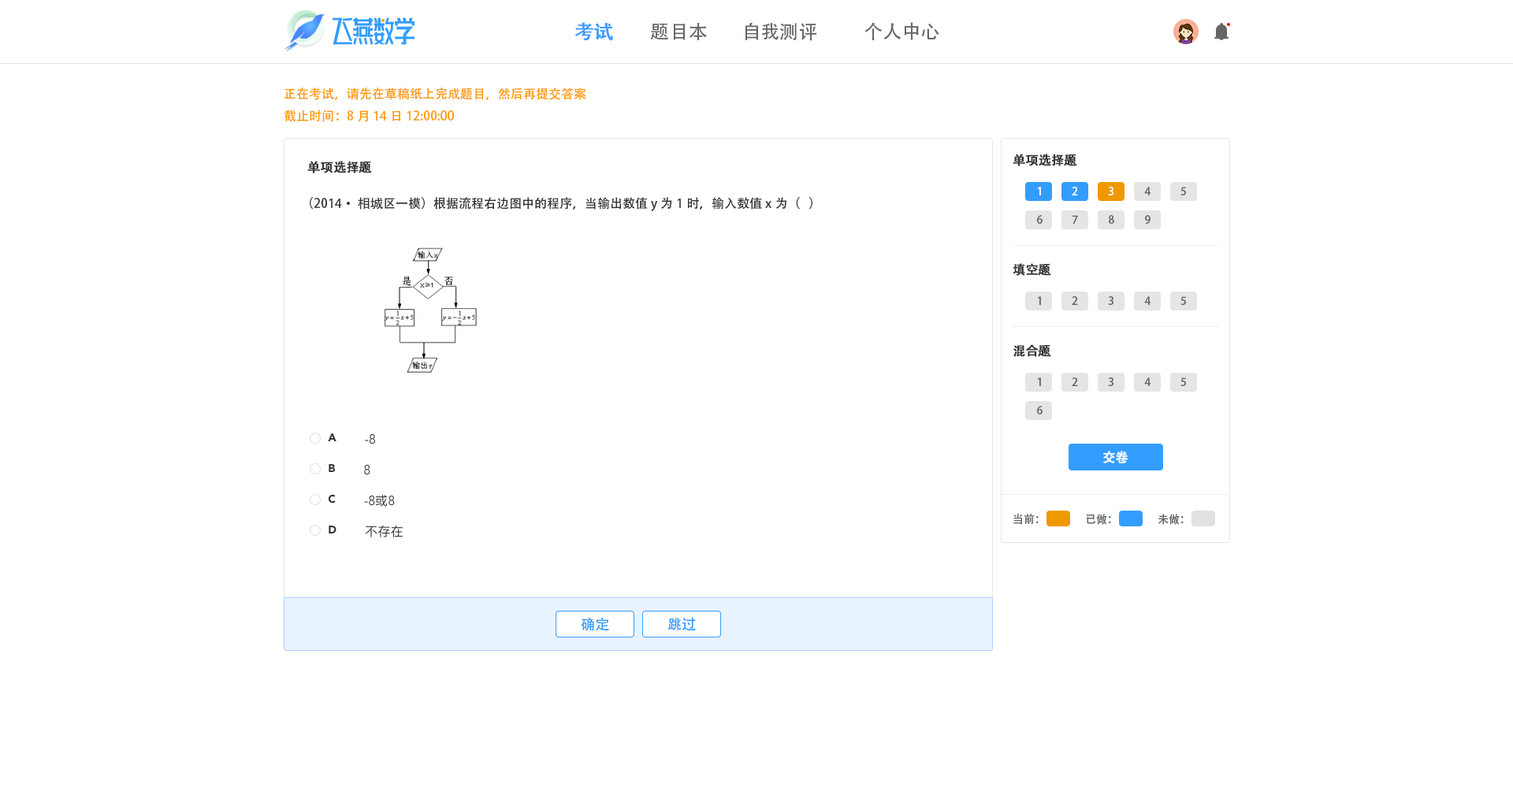
<style>
.page{position:relative;width:1513px;height:788px;background:#ffffff}
.page>*{position:absolute;margin:0}
.t1{font:18.9px "AdobeHeitiStd-Regular";color:#409eff;font-weight:bold}
.t2{font:18.9px "AdobeHeitiStd-Regular";color:#666666}
.t3{font:12.6px "AdobeHeitiStd-Regular";color:#ff9902}
.t4{font:12.6px "AdobeHeitiStd-Regular";color:#333333;font-weight:bold}
.t5{font:12.6px "AdobeHeitiStd-Regular";color:#333333}
.t6{font:11px "AdobeHeitiStd-Regular";color:#ffffff}
.t7{font:11px "AdobeHeitiStd-Regular";color:#666666}
.t8{font:12.6px "AdobeHeitiStd-Regular";color:#ffffff;font-weight:bold}
.t9{font:14.2px "AdobeHeitiStd-Regular";color:#339dff}
</style>
<div class="page">
<p class="t1" style="left:575px;top:22px;width:38px;height:19px">考试</p>
<p class="t2" style="left:650px;top:23px;width:57px;height:17px">题目本</p>
<p class="t2" style="left:745px;top:22px;width:71px;height:19px">自我测评</p>
<p class="t2" style="left:865px;top:22px;width:74px;height:18px">个人中心</p>
<p class="t3" style="left:284px;top:87px;width:302px;height:13px">正在考试，请先在草稿纸上完成题目，然后再提交答案</p>
<p class="t3" style="left:284px;top:110px;width:171px;height:12px">截止时间：8月14日12:00:00</p>
<p class="t4" style="left:307px;top:161px;width:65px;height:12px">单项选择题</p>
<p class="t4" style="left:1013px;top:154px;width:64px;height:12px">单项选择题</p>
<p class="t5" style="left:310px;top:197px;width:503px;height:14px">（2014·相城区一模）根据流程右边图中的程序，当输出数值y为1时，输入数值x为（   ）</p>
<p class="t6" style="left:1037px;top:187px;width:4px;height:8px">1</p>
<p class="t6" style="left:1072px;top:187px;width:6px;height:8px">2</p>
<p class="t6" style="left:1108px;top:187px;width:6px;height:8px">3</p>
<p class="t7" style="left:1144px;top:187px;width:7px;height:8px">4</p>
<p class="t7" style="left:1181px;top:187px;width:5px;height:8px">5</p>
<p class="t7" style="left:1037px;top:215px;width:6px;height:9px">6</p>
<p class="t7" style="left:1073px;top:215px;width:5px;height:9px">7</p>
<p class="t7" style="left:1109px;top:215px;width:5px;height:9px">8</p>
<p class="t7" style="left:1145px;top:215px;width:6px;height:9px">9</p>
<p class="t4" style="left:1013px;top:263px;width:38px;height:13px">填空题</p>
<p class="t7" style="left:1037px;top:296px;width:4px;height:9px">1</p>
<p class="t7" style="left:1072px;top:296px;width:6px;height:9px">2</p>
<p class="t7" style="left:1108px;top:296px;width:6px;height:9px">3</p>
<p class="t7" style="left:1144px;top:296px;width:7px;height:9px">4</p>
<p class="t7" style="left:1181px;top:296px;width:5px;height:9px">5</p>
<p class="t4" style="left:1013px;top:344px;width:38px;height:13px">混合题</p>
<p class="t7" style="left:1037px;top:377px;width:4px;height:9px">1</p>
<p class="t7" style="left:1072px;top:377px;width:6px;height:9px">2</p>
<p class="t7" style="left:1108px;top:377px;width:6px;height:9px">3</p>
<p class="t7" style="left:1144px;top:377px;width:7px;height:9px">4</p>
<p class="t7" style="left:1181px;top:377px;width:5px;height:9px">5</p>
<p class="t7" style="left:1037px;top:406px;width:6px;height:9px">6</p>
<p class="t8" style="left:1103px;top:451px;width:26px;height:12px">交卷</p>
<p class="t7" style="left:1013px;top:514px;width:26px;height:11px">当前：</p>
<p class="t7" style="left:1086px;top:514px;width:25px;height:11px">已做：</p>
<p class="t7" style="left:1158px;top:514px;width:26px;height:11px">未做：</p>
<p class="t9" style="left:581px;top:617px;width:28px;height:14px">确定</p>
<p class="t9" style="left:668px;top:617px;width:28px;height:14px">跳过</p>
</div>
